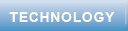
<style>
.page{position:relative;width:128px;height:31px}
.page>*{position:absolute;margin:0}
.t1{font:14.4px "Arial-BoldMT";letter-spacing:0.025em;color:#ffffff}
</style>
<div class="page">
<p class="t1" style="left:9px;top:12px;width:106px;height:10px">TECHNOLOGY</p>
</div>
